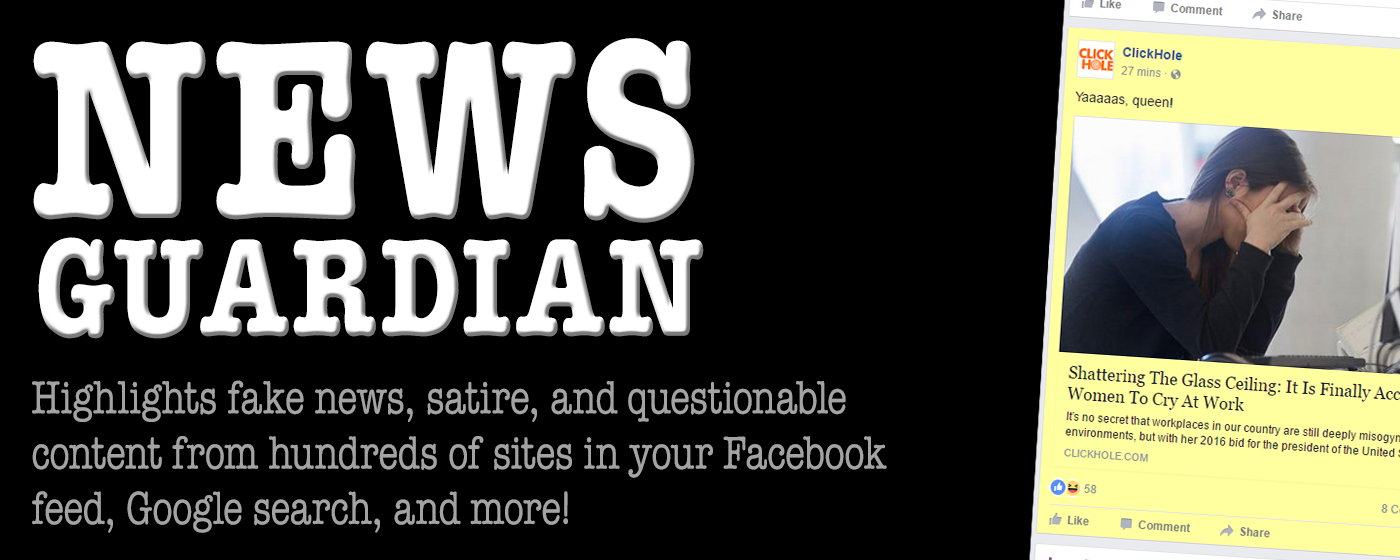
<style>
.page{position:relative;width:1400px;height:560px;background:#000000}
.page>*{position:absolute;margin:0}
.t1{font:255.6px "Editor-Bold";color:#ffffff;text-transform:uppercase;scale:0.78 1}
.t2{font:139.2px "Editor-Bold";color:#ffffff;text-transform:uppercase;scale:0.78 1}
.t3{font:46.1px "Editor-";color:#a3a3a3;scale:0.78 1}
</style>
<div class="page">
<p class="t1" style="left:33px;top:38px;width:662px;height:185px">News</p>
<p class="t2" style="left:38px;top:237px;width:666px;height:102px">Guardian</p>
<p class="t3" style="left:32px;top:380px;width:855px;height:153px">Highlights fake news, satire, and questionable<br>content from hundreds of sites in your Facebook <br>feed, Google search, and more!</p>
</div>
